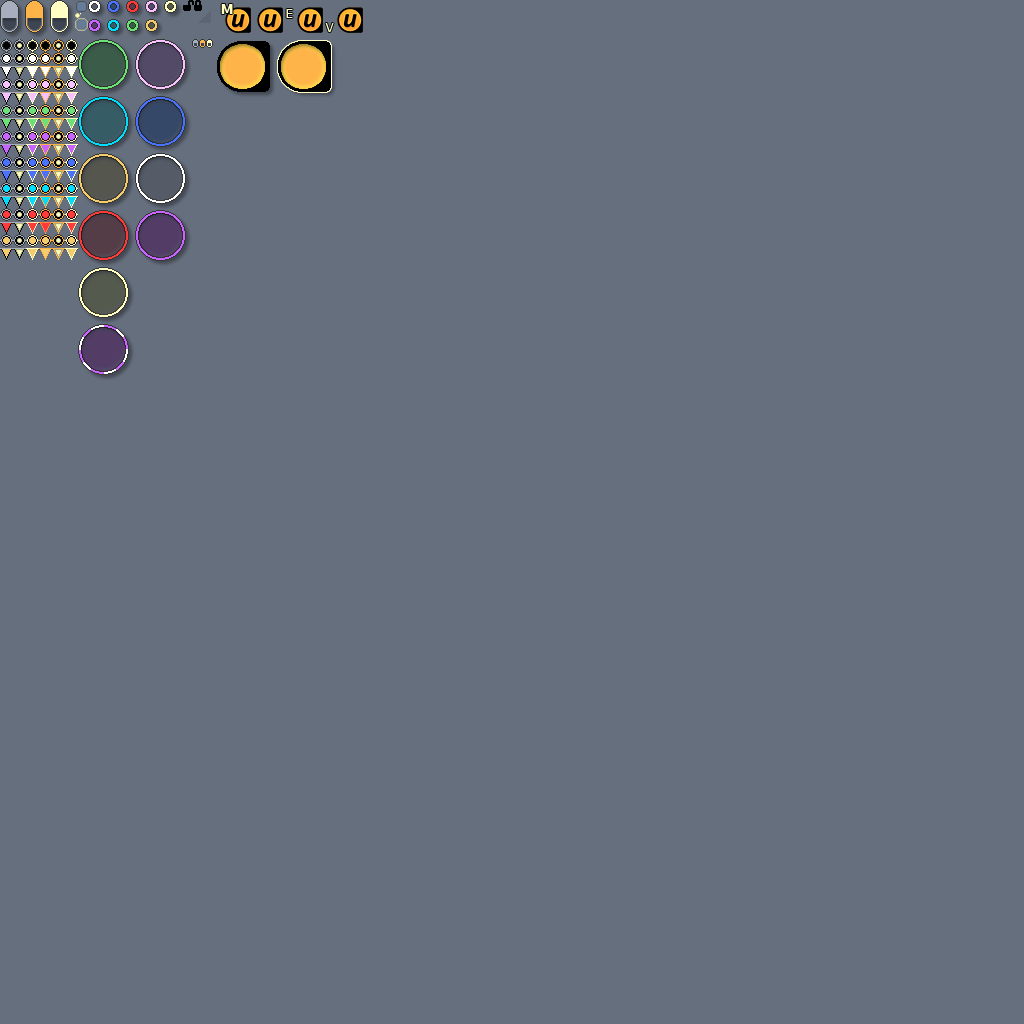
<style>
.page{position:relative;width:1024px;height:1024px;background:#666f7e}
.page>*{position:absolute;margin:0}
.t1{font:14px "Verdana-Bold";color:#ffffc4}
.t2{font:12px "Verdana";color:#ffffc4}
</style>
<div class="page">
<p class="t1" style="left:221px;top:4px;width:12px;height:10px">M</p>
<p class="t2" style="left:286px;top:9px;width:7px;height:9px">E</p>
<p class="t2" style="left:325px;top:23px;width:9px;height:9px">V</p>
</div>
